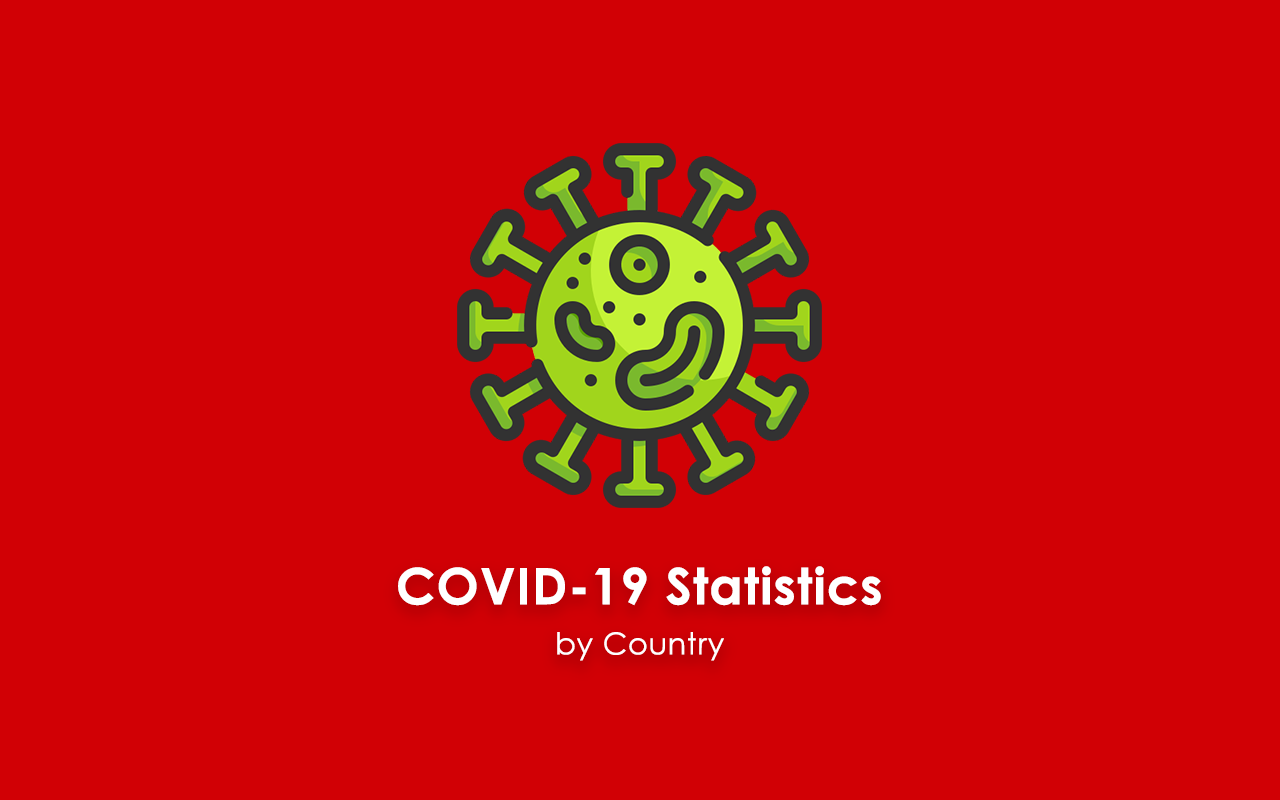
<style>
.page{position:relative;width:1280px;height:800px;background:#d10005}
.page>*{position:absolute;margin:0}
.t1{font:50.2px/60.3px "CenturyGothic-Bold";color:#ffffff;font-weight:bold}
.t2{font:30.1px/50.2px "CenturyGothic";color:#ffffff;font-weight:bold}
</style>
<div class="page">
<p class="t1" style="left:398px;top:566px;width:483px;height:95px;text-align:center">COVID-19 Statistics<br><span class="t2">by Country</span></p>
</div>
